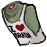
<style>
.page{position:relative;width:47px;height:47px;background:#ffffff}
.page>*{position:absolute;margin:0}
.t1{font:10.7px "MuYaoSoftbrush";color:#000000;text-transform:uppercase;scale:1.27 1}
.t2{font:10.3px "MuYaoSoftbrush";color:#000000;text-transform:uppercase;scale:0.6 1}
</style>
<div class="page">
<p class="t1" style="left:8px;top:25px;width:8px;height:7px;rotate:1deg">I</p>
<p class="t2" style="left:13px;top:32px;width:19px;height:6px">BRAIN</p>
</div>
